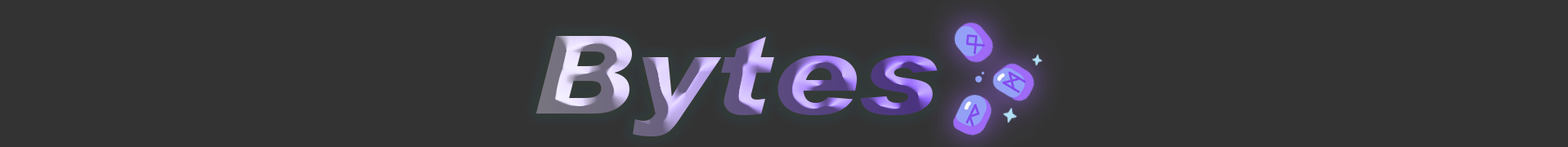
<style>
.page{position:relative;width:1568px;height:147px;background:#333333}
.page>*{position:absolute;margin:0}
.t1{font:108.8px "Arial-BlackItalic";scale:1.2 1}
</style>
<div class="page">
<p class="t1" style="left:535px;top:36px;width:403px;height:101px">Bytes</p>
</div>
